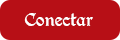
<style>
.page{position:relative;width:120px;height:40px;background:#b70f16}
.page>*{position:absolute;margin:0}
.t1{font:13px "BerryRotunda-Regular";color:#ffffff}
</style>
<div class="page">
<p class="t1" style="left:24px;top:13px;width:69px;height:13px">Conectar</p>
</div>
